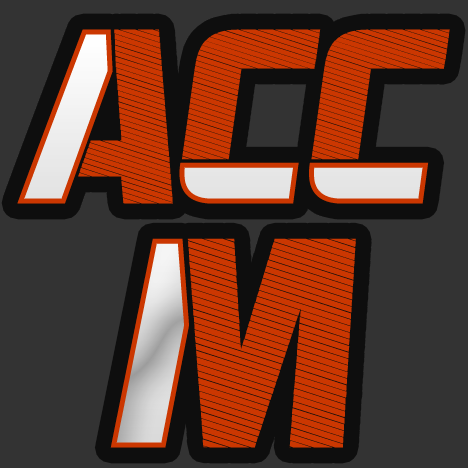
<style>
.page{position:relative;width:468px;height:468px;background:#333333}
.page>*{position:absolute;margin:0}
.t1{font:250px "Redemption-Italic";letter-spacing:0.01em}
.t2{font:300px "Redemption-Italic";letter-spacing:0.01em;color:#cb3701}
</style>
<div class="page">
<p class="t1" style="left:17px;top:29px;width:433px;height:175px">ACC</p>
<p class="t2" style="left:110px;top:238px;width:246px;height:210px">M</p>
</div>
